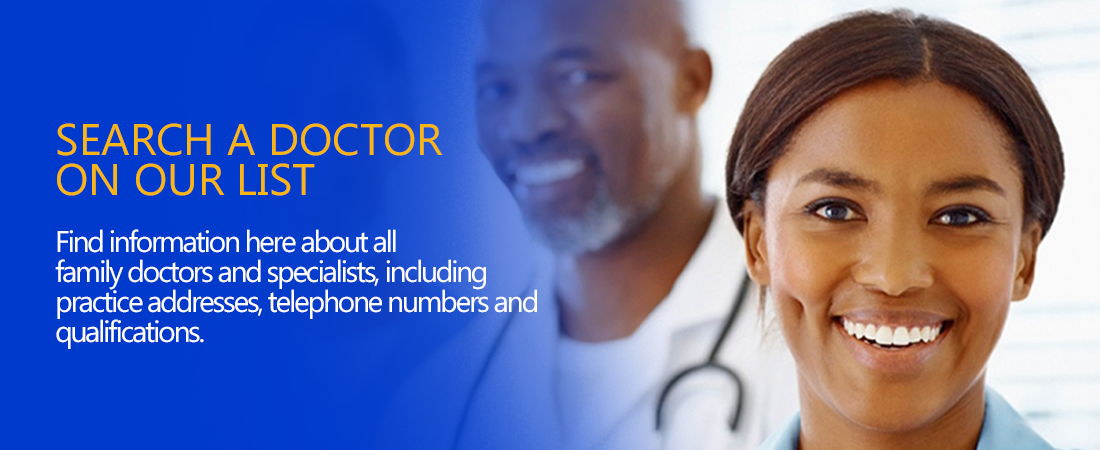
<style>
.page{position:relative;width:1100px;height:450px}
.page>*{position:absolute;margin:0}
.t1{font:44.3px/40px "Ebrima";color:#f9b511}
.t2{font:30px/30px "Ebrima";letter-spacing:-0.075em;color:#ffffff}
</style>
<div class="page">
<p class="t1" style="left:57px;top:123px;width:386px;height:73px">SEARCH A DOCTOR<br>ON OUR LIST</p>
<p class="t2" style="left:55px;top:229px;width:482px;height:120px">Find information here about all<br>family doctors and specialists, including<br>practice addresses, telephone numbers and<br>qualifications.</p>
</div>
